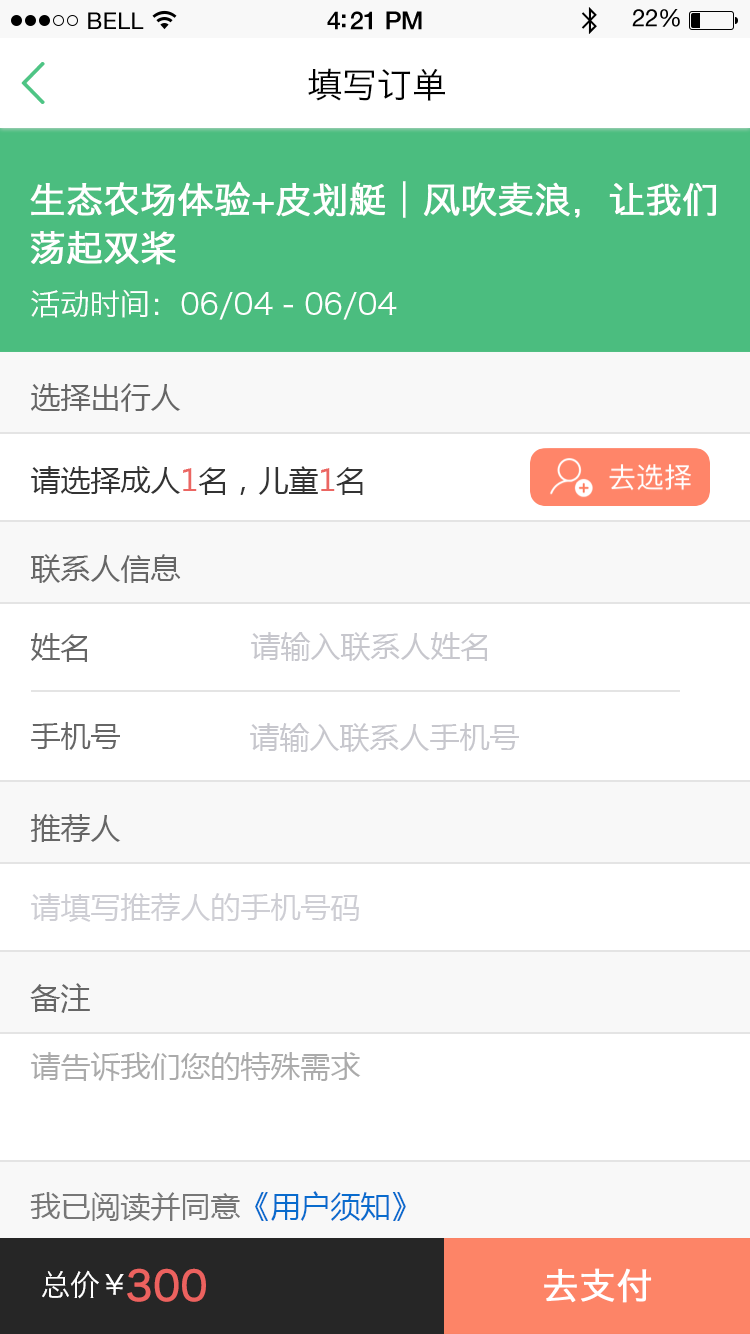
<style>
.page{position:relative;width:750px;height:1334px;background:#ffffff}
.page>*{position:absolute;margin:0}
.t1{font:23px "HelveticaNeue";letter-spacing:0.02em;color:#000000}
.t2{font:25px "HelveticaNeue-Medium";letter-spacing:-0.02em;color:#000000}
.t3{font:24px "HelveticaNeue";letter-spacing:-0.02em;color:#000000}
.t4{font:57.9px "YouYuan";color:#4ec585;font-weight:bold}
.t5{font:35px "HiraginoSansGB-W3";color:#000000}
.t6{font:36px/48px "HiraginoSansGB-W3";color:#ffffff;font-weight:bold}
.t7{font:30px "HiraginoSansGB-W3";color:#ffffff}
.t8{font:30px "MicrosoftYaHei";color:#666666}
.t9{font:30px "MicrosoftYaHei";color:#333333}
.t10{font:30px "MicrosoftYaHei";color:#eb6662}
.t11{font:30px "MicrosoftYaHei";color:#c7c7cd}
.t12{font:30px "MicrosoftYaHei";color:#ceced4}
.t13{font:30px "MicrosoftYaHei";color:#ababab}
.t14{font:30px "MicrosoftYaHei";color:#777777}
.t15{font:30px "MicrosoftYaHei";color:#096bcd}
.t16{font:40px "HiraginoSansGB-W3";color:#ec625f;font-weight:bold}
.t17{font:27.2px "HiraginoSansGB-W3";letter-spacing:-0.075em;color:#ffffff}
.t18{font:36px "HiraginoSansGB-W3";color:#ffffff;font-weight:bold}
</style>
<div class="page">
<p class="t1" style="left:88px;top:12px;width:56px;height:17px">BELL</p>
<p class="t2" style="left:327px;top:11px;width:95px;height:19px">4:21 PM</p>
<p class="t3" style="left:632px;top:9px;width:48px;height:18px">22%</p>
<p class="t4" style="left:21px;top:62px;width:24px;height:42px">&lt;</p>
<p class="t5" style="left:308px;top:68px;width:137px;height:33px">填写订单</p>
<p class="t6" style="left:30px;top:181px;width:687px;height:84px">生态农场体验+皮划艇︱风吹麦浪，让我们<br>荡起双桨</p>
<p class="t7" style="left:31px;top:289px;width:366px;height:31px">活动时间：06/04 - 06/04</p>
<p class="t8" style="left:31px;top:383px;width:150px;height:29px">选择出行人</p>
<p class="t9" style="left:31px;top:466px;width:332px;height:29px">请选择成人<span class="t10">1</span>名，儿童<span class="t10">1</span>名</p>
<p class="t8" style="left:30px;top:554px;width:151px;height:29px">联系人信息</p>
<p class="t8" style="left:31px;top:633px;width:56px;height:29px">姓名</p>
<p class="t11" style="left:251px;top:632px;width:236px;height:29px">请输入联系人姓名</p>
<p class="t8" style="left:31px;top:722px;width:89px;height:28px">手机号</p>
<p class="t11" style="left:250px;top:723px;width:269px;height:29px">请输入联系人手机号</p>
<p class="t8" style="left:31px;top:814px;width:90px;height:28px">推荐人</p>
<p class="t12" style="left:31px;top:893px;width:328px;height:29px">请填写推荐人的手机号码</p>
<p class="t8" style="left:30px;top:983px;width:60px;height:30px">备注</p>
<p class="t13" style="left:31px;top:1052px;width:330px;height:29px">请告诉我们您的特殊需求</p>
<p class="t14" style="left:30px;top:1191px;width:376px;height:30px">我已阅读并同意<span class="t15">《用户须知》</span></p>
<p class="t7" style="left:42px;top:1270px;width:57px;height:29px">总价</p>
<p class="t16" style="left:105px;top:1268px;width:101px;height:34px"><span class="t17">￥</span>300</p>
<p class="t18" style="left:544px;top:1268px;width:108px;height:35px">去支付</p>
</div>
